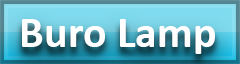
<style>
.page{position:relative;width:240px;height:64px}
.page>*{position:absolute;margin:0}
.t1{font:44.4px "Calibri-Bold";color:#ffffff}
</style>
<div class="page">
<p class="t1" style="left:22px;top:19px;width:193px;height:35px">Buro Lamp</p>
</div>
